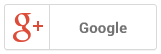
<style>
.page{position:relative;width:161px;height:54px;background:#ffffff}
.page>*{position:absolute;margin:0}
.t1{font:15px "Roboto-Bold";letter-spacing:0.01em;color:#737373}
</style>
<div class="page">
<p class="t1" style="left:79px;top:21px;width:48px;height:15px">Google</p>
</div>
